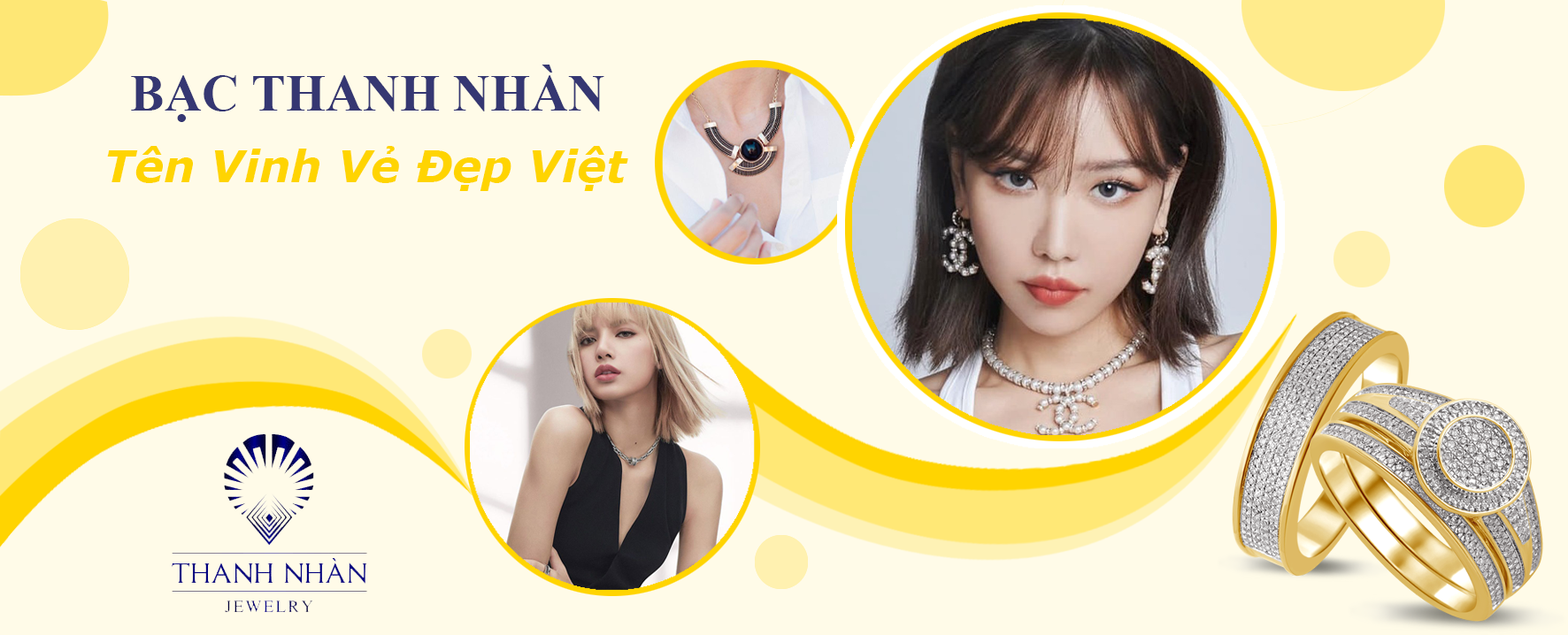
<style>
.page{position:relative;width:1568px;height:635px;background:#fffbe8}
.page>*{position:absolute;margin:0}
.t1{font:51.6px "TimesNewRomanPS-BoldMT";color:#353772}
.t2{font:44.2px "Verdana-BoldItalic";color:#ffd401}
</style>
<div class="page">
<p class="t1" style="left:131px;top:65px;width:473px;height:57px">BẠC THANH NHÀN</p>
<p class="t2" style="left:107px;top:146px;width:521px;height:45px">Tên Vinh Vẻ Đẹp Việt</p>
</div>
